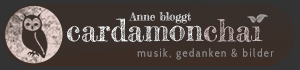
<style>
.page{position:relative;width:300px;height:70px}
.page>*{position:absolute;margin:0}
.t1{font:11.3px "FrederickatheGreat-Regular";color:#ffffff}
.t2{font:30px "FrederickatheGreat-Regular";color:#ffffff}
.t3{font:30px "FrederickatheGreat-Regular";color:#ddc6c6}
.t4{font:11.3px "CabinCondensed";letter-spacing:0.12em;color:#908c8a}
</style>
<div class="page">
<p class="t1" style="left:128px;top:12px;width:63px;height:12px">Anne bloggt</p>
<p class="t2" style="left:67px;top:18px;width:196px;height:24px">cardamon<span class="t3">chai</span></p>
<p class="t4" style="left:137px;top:48px;width:137px;height:12px">musik, gedanken &amp; bilder</p>
</div>
